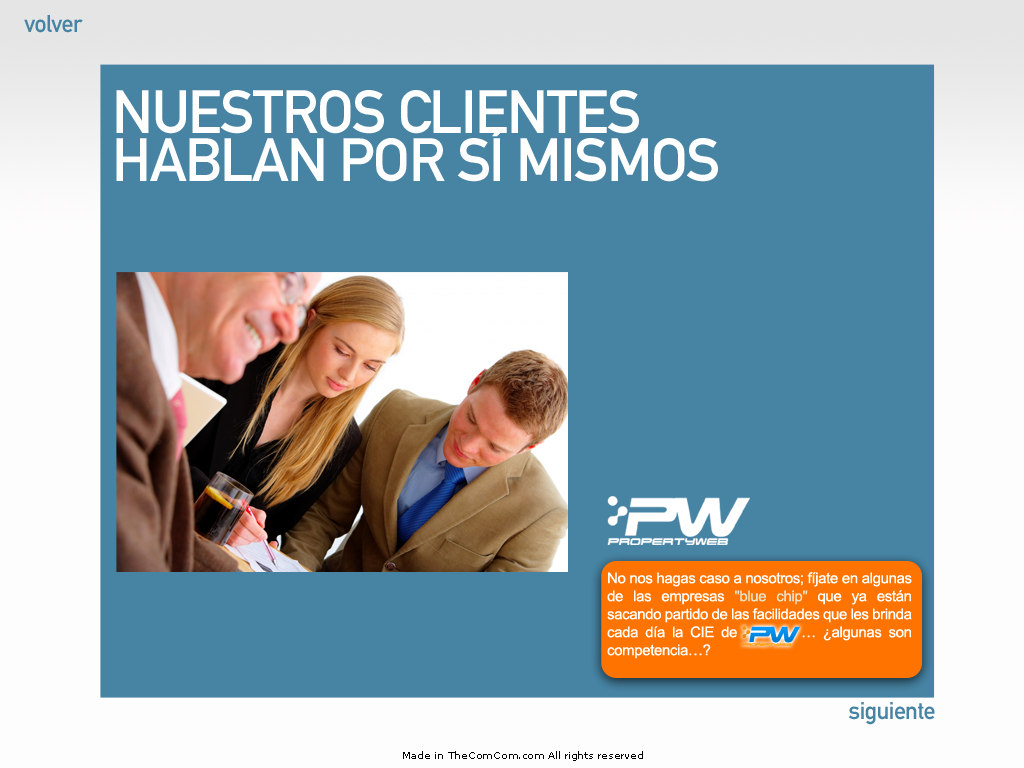
<style>
.page{position:relative;width:1024px;height:768px;background:#4784a4}
.page>*{position:absolute;margin:0}
.t1{font:24px "DINMittelschriftStd";letter-spacing:-0.025em;color:#4784a4}
.t2{font:60px/48px "DINMittelschriftStd";letter-spacing:-0.025em;color:#ffffff;text-transform:uppercase}
.t3{font:15px "ArialMT";letter-spacing:-0.025em;color:#ffffff}
.t4{font:15px "ArialMT";letter-spacing:-0.025em;color:#ebe1c8}
.t5{font:10px "MSReferenceSansSerif";letter-spacing:-0.025em;color:#010101}
</style>
<div class="page">
<p class="t1" style="left:24px;top:15px;width:59px;height:18px">volver</p>
<p class="t2" style="left:116px;top:90px;width:602px;height:92px">nuestros clientes <br>hablan por sí mismos</p>
<p class="t3" style="left:607px;top:572px;width:305px;height:87px;text-align:justify">No nos hagas caso a nosotros; fíjate en algunas de las empresas <span class="t4">"blue chip"</span> que ya están sacando partido de las facilidades que les brinda cada día la CIE de         … ¿algunas son competencia…?</p>
<p class="t1" style="left:848px;top:702px;width:87px;height:23px">siguiente</p>
<p class="t5" style="left:403px;top:751px;width:240px;height:10px">Made in TheComCom.com All rights reserved</p>
</div>
